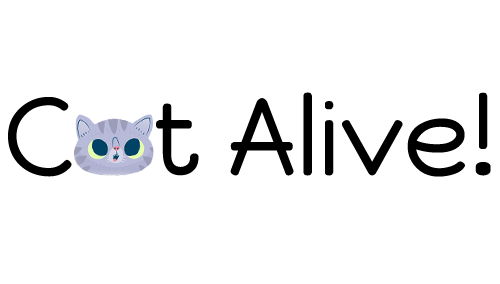
<style>
.page{position:relative;width:500px;height:284px;background:#ffffff}
.page>*{position:absolute;margin:0}
.t1{font:110.1px "HappyMonkey-Regular";color:#000000}
</style>
<div class="page">
<p class="t1" style="left:8px;top:92px;width:483px;height:85px">C   t Alive!</p>
</div>
